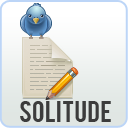
<style>
.page{position:relative;width:128px;height:128px}
.page>*{position:absolute;margin:0}
.t1{font:24px "Bebas";color:#3c3c3c}
</style>
<div class="page">
<p class="t1" style="left:20px;top:101px;width:91px;height:21px">solitude</p>
</div>
